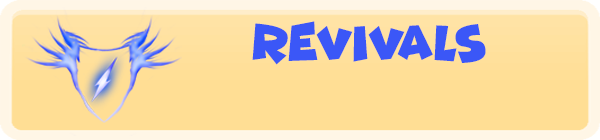
<style>
.page{position:relative;width:600px;height:140px;background:#ffde94}
.page>*{position:absolute;margin:0}
.t1{font:50px "Funhouse";color:#3b57f7}
</style>
<div class="page">
<p class="t1" style="left:252px;top:21px;width:234px;height:44px">revivals</p>
</div>
